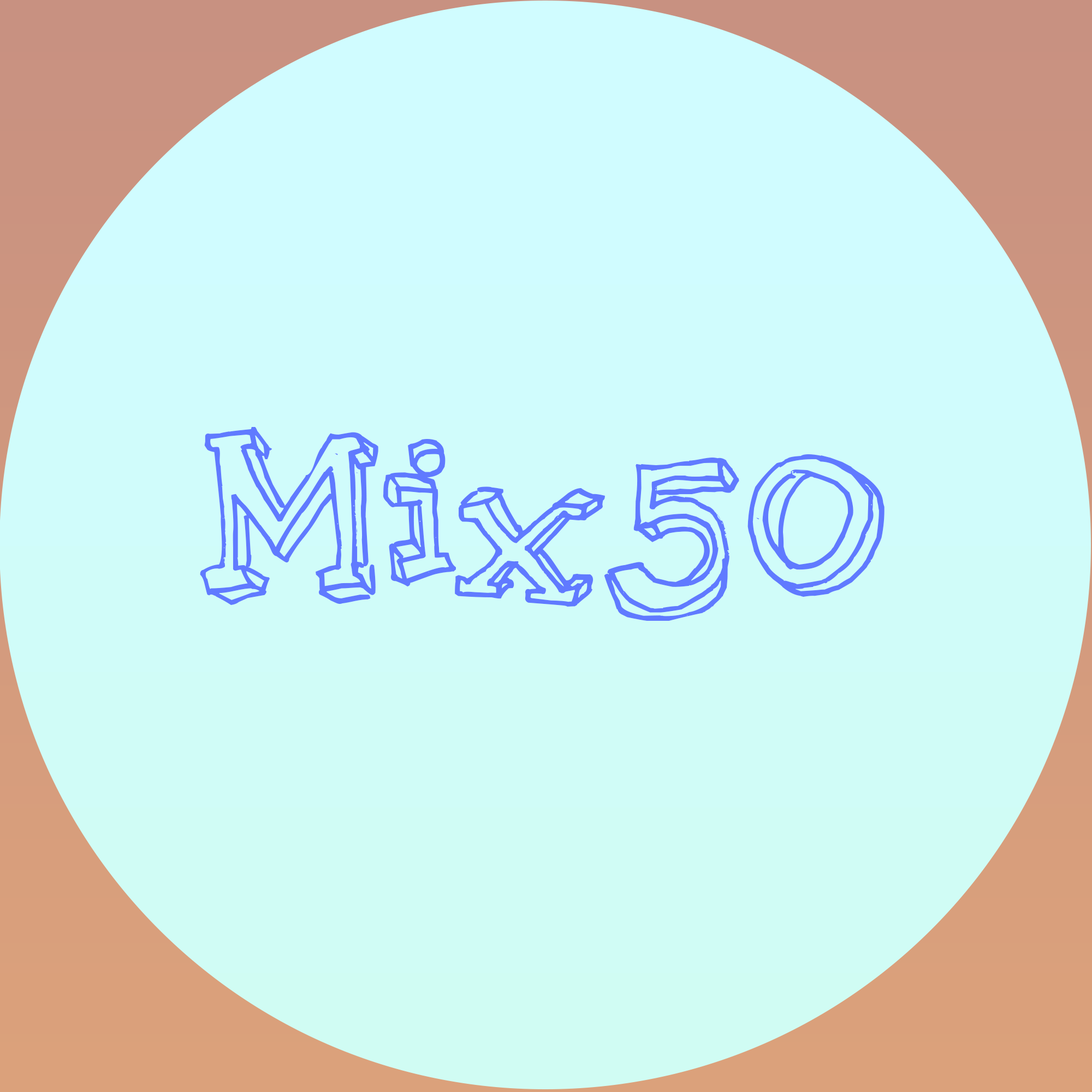
<style>
.page{position:relative;width:1092px;height:1092px}
.page>*{position:absolute;margin:0}
.t1{font:332px "Pijamas";color:#607aff;scale:0.95 1}
</style>
<div class="page">
<p class="t1" style="left:200px;top:427px;width:685px;height:194px">Mix50</p>
</div>
